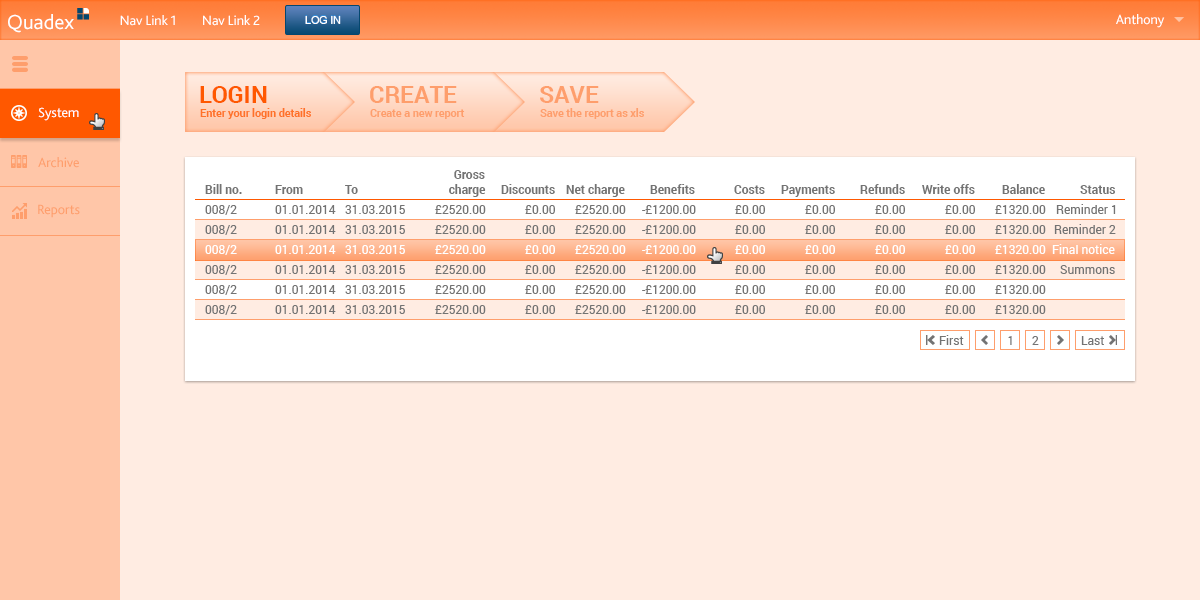
<style>
.page{position:relative;width:1200px;height:600px;background:#ffece2}
.page>*{position:absolute;margin:0}
.t1{font:21.1px "Bliss2";letter-spacing:-0.01em;color:#ffffff}
.t2{font:14px "Bliss2";letter-spacing:-0.01em;color:#ffffff}
.t3{font:10.5px "ArialMT";color:#ffffff}
.t4{font:24px "Roboto-Bold";color:#ff5800}
.t5{font:24px "Roboto-Bold";color:#fe9e6c}
.t6{font:10.7px "Roboto-Bold";color:#ff7228}
.t7{font:10.7px "Roboto-Bold";color:#fe9e6c}
.t8{font:14px "Bliss2";letter-spacing:-0.01em;color:#fe9e6c}
.t9{font:12px "Roboto-Bold";color:#737373}
.t10{font:12px "Roboto-Regular";color:#737373}
.t11{font:12px "Roboto-Regular";color:#ffffff}
</style>
<div class="page">
<p class="t1" style="left:8px;top:14px;width:66px;height:19px">Quadex</p>
<p class="t2" style="left:120px;top:15px;width:55px;height:11px">Nav Link 1</p>
<p class="t2" style="left:203px;top:15px;width:57px;height:11px">Nav Link 2</p>
<p class="t3" style="left:305px;top:16px;width:36px;height:8px">LOG IN</p>
<p class="t2" style="left:1116px;top:14px;width:49px;height:14px">Anthony</p>
<p class="t4" style="left:200px;top:86px;width:67px;height:17px">LOGIN</p>
<p class="t5" style="left:370px;top:86px;width:87px;height:17px">CREATE</p>
<p class="t5" style="left:540px;top:86px;width:59px;height:17px">SAVE</p>
<p class="t2" style="left:38px;top:107px;width:41px;height:14px">System</p>
<p class="t6" style="left:200px;top:108px;width:111px;height:11px">Enter your login details</p>
<p class="t7" style="left:370px;top:109px;width:95px;height:10px">Create a new report</p>
<p class="t7" style="left:540px;top:108px;width:104px;height:11px">Save the report as xls</p>
<p class="t8" style="left:38px;top:157px;width:41px;height:11px">Archive</p>
<p class="t9" style="left:454px;top:170px;width:31px;height:9px">Gross</p>
<p class="t9" style="left:205px;top:184px;width:37px;height:10px">Bill no.</p>
<p class="t9" style="left:275px;top:185px;width:28px;height:9px">From</p>
<p class="t9" style="left:345px;top:185px;width:13px;height:9px">To</p>
<p class="t9" style="left:449px;top:184px;width:37px;height:13px">charge</p>
<p class="t9" style="left:501px;top:184px;width:54px;height:10px">Discounts</p>
<p class="t9" style="left:566px;top:184px;width:59px;height:13px">Net charge</p>
<p class="t9" style="left:650px;top:184px;width:45px;height:10px">Benefits</p>
<p class="t9" style="left:734px;top:185px;width:31px;height:9px">Costs</p>
<p class="t9" style="left:781px;top:185px;width:54px;height:12px">Payments</p>
<p class="t9" style="left:860px;top:184px;width:45px;height:10px">Refunds</p>
<p class="t9" style="left:922px;top:184px;width:53px;height:10px">Write offs</p>
<p class="t9" style="left:1002px;top:184px;width:43px;height:10px">Balance</p>
<p class="t9" style="left:1080px;top:185px;width:35px;height:9px">Status</p>
<p class="t8" style="left:38px;top:204px;width:42px;height:14px">Reports</p>
<p class="t10" style="left:205px;top:205px;width:32px;height:10px">008/2</p>
<p class="t10" style="left:275px;top:205px;width:61px;height:9px">01.01.2014</p>
<p class="t10" style="left:345px;top:205px;width:60px;height:9px">31.03.2015</p>
<p class="t10" style="left:435px;top:205px;width:51px;height:9px">£2520.00</p>
<p class="t10" style="left:525px;top:205px;width:30px;height:9px">£0.00</p>
<p class="t10" style="left:575px;top:205px;width:51px;height:9px">£2520.00</p>
<p class="t10" style="left:642px;top:205px;width:54px;height:9px">-£1200.00</p>
<p class="t10" style="left:735px;top:205px;width:30px;height:9px">£0.00</p>
<p class="t10" style="left:805px;top:205px;width:30px;height:9px">£0.00</p>
<p class="t10" style="left:875px;top:205px;width:30px;height:9px">£0.00</p>
<p class="t10" style="left:945px;top:205px;width:30px;height:9px">£0.00</p>
<p class="t10" style="left:995px;top:205px;width:51px;height:9px">£1320.00</p>
<p class="t10" style="left:1056px;top:204px;width:60px;height:10px">Reminder 1</p>
<p class="t10" style="left:205px;top:225px;width:32px;height:10px">008/2</p>
<p class="t10" style="left:275px;top:225px;width:61px;height:9px">01.01.2014</p>
<p class="t10" style="left:345px;top:225px;width:60px;height:9px">31.03.2015</p>
<p class="t10" style="left:435px;top:225px;width:51px;height:9px">£2520.00</p>
<p class="t10" style="left:525px;top:225px;width:30px;height:9px">£0.00</p>
<p class="t10" style="left:575px;top:225px;width:51px;height:9px">£2520.00</p>
<p class="t10" style="left:642px;top:225px;width:54px;height:9px">-£1200.00</p>
<p class="t10" style="left:735px;top:225px;width:30px;height:9px">£0.00</p>
<p class="t10" style="left:805px;top:225px;width:30px;height:9px">£0.00</p>
<p class="t10" style="left:875px;top:225px;width:30px;height:9px">£0.00</p>
<p class="t10" style="left:945px;top:225px;width:30px;height:9px">£0.00</p>
<p class="t10" style="left:995px;top:225px;width:51px;height:9px">£1320.00</p>
<p class="t10" style="left:1054px;top:224px;width:62px;height:10px">Reminder 2</p>
<p class="t11" style="left:205px;top:245px;width:32px;height:10px">008/2</p>
<p class="t11" style="left:275px;top:245px;width:61px;height:9px">01.01.2014</p>
<p class="t11" style="left:345px;top:245px;width:60px;height:9px">31.03.2015</p>
<p class="t11" style="left:435px;top:245px;width:51px;height:9px">£2520.00</p>
<p class="t11" style="left:525px;top:245px;width:30px;height:9px">£0.00</p>
<p class="t11" style="left:575px;top:245px;width:51px;height:9px">£2520.00</p>
<p class="t11" style="left:642px;top:245px;width:54px;height:9px">-£1200.00</p>
<p class="t11" style="left:735px;top:245px;width:30px;height:9px">£0.00</p>
<p class="t11" style="left:805px;top:245px;width:30px;height:9px">£0.00</p>
<p class="t11" style="left:875px;top:245px;width:30px;height:9px">£0.00</p>
<p class="t11" style="left:945px;top:245px;width:30px;height:9px">£0.00</p>
<p class="t11" style="left:995px;top:245px;width:51px;height:9px">£1320.00</p>
<p class="t11" style="left:1052px;top:244px;width:63px;height:10px">Final notice</p>
<p class="t10" style="left:205px;top:265px;width:32px;height:10px">008/2</p>
<p class="t10" style="left:275px;top:265px;width:61px;height:9px">01.01.2014</p>
<p class="t10" style="left:345px;top:265px;width:60px;height:9px">31.03.2015</p>
<p class="t10" style="left:435px;top:265px;width:51px;height:9px">£2520.00</p>
<p class="t10" style="left:525px;top:265px;width:30px;height:9px">£0.00</p>
<p class="t10" style="left:575px;top:265px;width:51px;height:9px">£2520.00</p>
<p class="t10" style="left:642px;top:265px;width:54px;height:9px">-£1200.00</p>
<p class="t10" style="left:735px;top:265px;width:30px;height:9px">£0.00</p>
<p class="t10" style="left:805px;top:265px;width:30px;height:9px">£0.00</p>
<p class="t10" style="left:875px;top:265px;width:30px;height:9px">£0.00</p>
<p class="t10" style="left:945px;top:265px;width:30px;height:9px">£0.00</p>
<p class="t10" style="left:995px;top:265px;width:51px;height:9px">£1320.00</p>
<p class="t10" style="left:1060px;top:265px;width:55px;height:9px">Summons</p>
<p class="t10" style="left:205px;top:285px;width:32px;height:10px">008/2</p>
<p class="t10" style="left:275px;top:285px;width:61px;height:9px">01.01.2014</p>
<p class="t10" style="left:345px;top:285px;width:60px;height:9px">31.03.2015</p>
<p class="t10" style="left:435px;top:285px;width:51px;height:9px">£2520.00</p>
<p class="t10" style="left:525px;top:285px;width:30px;height:9px">£0.00</p>
<p class="t10" style="left:575px;top:285px;width:51px;height:9px">£2520.00</p>
<p class="t10" style="left:642px;top:285px;width:54px;height:9px">-£1200.00</p>
<p class="t10" style="left:735px;top:285px;width:30px;height:9px">£0.00</p>
<p class="t10" style="left:805px;top:285px;width:30px;height:9px">£0.00</p>
<p class="t10" style="left:875px;top:285px;width:30px;height:9px">£0.00</p>
<p class="t10" style="left:945px;top:285px;width:30px;height:9px">£0.00</p>
<p class="t10" style="left:995px;top:285px;width:51px;height:9px">£1320.00</p>
<p class="t10" style="left:205px;top:305px;width:32px;height:10px">008/2</p>
<p class="t10" style="left:275px;top:305px;width:61px;height:9px">01.01.2014</p>
<p class="t10" style="left:345px;top:305px;width:60px;height:9px">31.03.2015</p>
<p class="t10" style="left:435px;top:305px;width:51px;height:9px">£2520.00</p>
<p class="t10" style="left:525px;top:305px;width:30px;height:9px">£0.00</p>
<p class="t10" style="left:575px;top:305px;width:51px;height:9px">£2520.00</p>
<p class="t10" style="left:642px;top:305px;width:54px;height:9px">-£1200.00</p>
<p class="t10" style="left:735px;top:305px;width:30px;height:9px">£0.00</p>
<p class="t10" style="left:805px;top:305px;width:30px;height:9px">£0.00</p>
<p class="t10" style="left:875px;top:305px;width:30px;height:9px">£0.00</p>
<p class="t10" style="left:945px;top:305px;width:30px;height:9px">£0.00</p>
<p class="t10" style="left:995px;top:305px;width:51px;height:9px">£1320.00</p>
<p class="t10" style="left:939px;top:335px;width:25px;height:10px">First</p>
<p class="t10" style="left:1008px;top:336px;width:4px;height:9px">1</p>
<p class="t10" style="left:1032px;top:336px;width:7px;height:9px">2</p>
<p class="t10" style="left:1081px;top:336px;width:23px;height:9px">Last</p>
</div>
